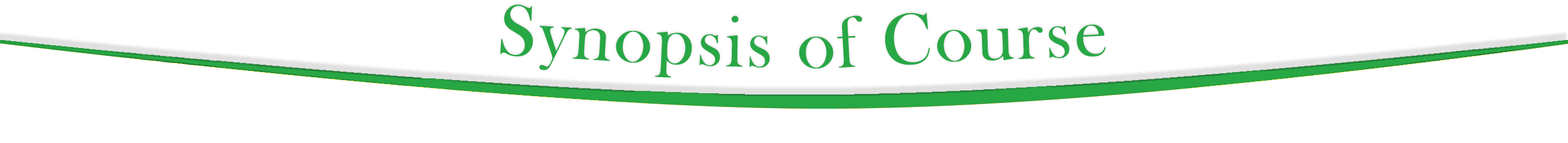
<style>
.page{position:relative;width:1568px;height:143px;background:#ffffff}
.page>*{position:absolute;margin:0}
.t1{font:74px "BaskOldFace";letter-spacing:0.04em;color:#28a745}
</style>
<div class="page">
<p class="t1" style="left:500px;top:5px;width:606px;height:73px">Synopsis of Course</p>
</div>
